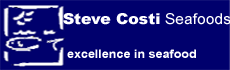
<style>
.page{position:relative;width:230px;height:70px;background:#00006d}
.page>*{position:absolute;margin:0}
.t1{font:15px "Arial-Black";color:#ffffff;scale:1.05 1}
.t2{font:15px "ArialMT";color:#ffffff;scale:1.05 1}
.t3{font:12px "Arial-BoldMT";color:#ffffff;scale:1.05 1}
</style>
<div class="page">
<p class="t1" style="left:63px;top:13px;width:168px;height:12px">Steve Costi<span class="t2"> Seafoods</span></p>
<p class="t3" style="left:67px;top:49px;width:129px;height:9px">excellence in seafood</p>
</div>
